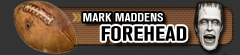
<style>
.page{position:relative;width:240px;height:55px;background:#333333}
.page>*{position:absolute;margin:0}
.t1{font:11.9px "AkzidenzGroteskBQ-BdCnd";color:#ffffff;scale:1.18 1}
.t2{font:20.5px "AkzidenzGroteskBQ-BdCnd";color:#000000;scale:1.18 1}
</style>
<div class="page">
<p class="t1" style="left:83px;top:13px;width:80px;height:9px">MARK MADDENS</p>
<p class="t2" style="left:101px;top:26px;width:86px;height:15px">FOREHEAD</p>
</div>
